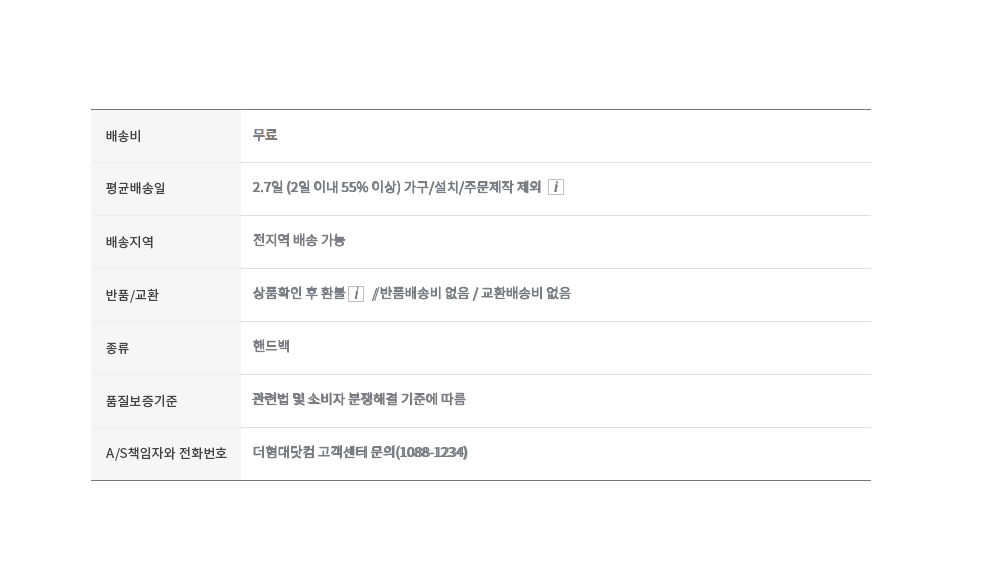
<style>
.page{position:relative;width:994px;height:584px;background:#ffffff}
.page>*{position:absolute;margin:0}
.t1{font:13px "NotoSansKR-Regular";letter-spacing:0.01em;color:#444444}
.t2{font:14px "NotoSansKR-Regular";letter-spacing:-0.025em;color:#7b7c82}
.t3{font:14px "NotoSansKR-Regular";letter-spacing:-0.025em;color:#7b7c82;font-style:italic}
</style>
<div class="page">
<p class="t1" style="left:106px;top:129px;width:34px;height:14px">배송비</p>
<p class="t2" style="left:253px;top:129px;width:25px;height:13px">무료</p>
<p class="t1" style="left:106px;top:182px;width:59px;height:13px">평균배송일</p>
<p class="t2" style="left:252px;top:180px;width:306px;height:15px">2.7일 (2일 이내 55% 이상) 가구/설치/주문제작 제외    <span class="t3">i</span></p>
<p class="t2" style="left:253px;top:233px;width:93px;height:14px">전지역 배송 가능</p>
<p class="t1" style="left:106px;top:235px;width:47px;height:14px">배송지역</p>
<p class="t1" style="left:106px;top:288px;width:53px;height:15px">반품/교환</p>
<p class="t2" style="left:253px;top:286px;width:318px;height:15px">상품확인 후 환불   <span class="t3">i </span>     /반품배송비 없음 / 교환배송비 없음</p>
<p class="t1" style="left:106px;top:342px;width:23px;height:13px">종류</p>
<p class="t2" style="left:253px;top:339px;width:36px;height:14px">핸드백</p>
<p class="t1" style="left:106px;top:394px;width:71px;height:14px">품질보증기준</p>
<p class="t2" style="left:252px;top:392px;width:214px;height:14px">관련법 및 소비자 분쟁해결 기준에 따름</p>
<p class="t1" style="left:106px;top:446px;width:121px;height:15px">A/S책임자와 전화번호</p>
<p class="t2" style="left:253px;top:445px;width:215px;height:15px">더형대닷컴 고객센터 문의(1088-1234)</p>
</div>
